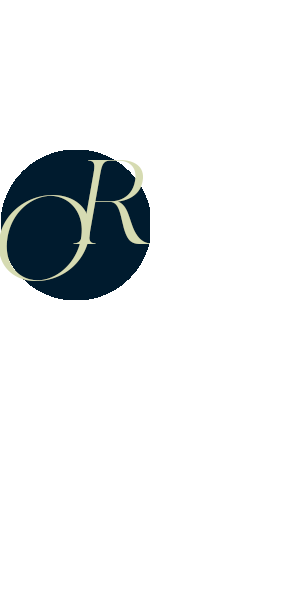
<style>
.page{position:relative;width:300px;height:600px;background:#ffffff}
.page>*{position:absolute;margin:0}
.t1{font:119.7px "MADECanvas-Light";color:#d6dbb2;font-style:italic}
</style>
<div class="page">
<p class="t1" style="left:73px;top:160px;width:78px;height:84px">R</p>
<p class="t1" style="left:0px;top:195px;width:90px;height:86px">O</p>
</div>
